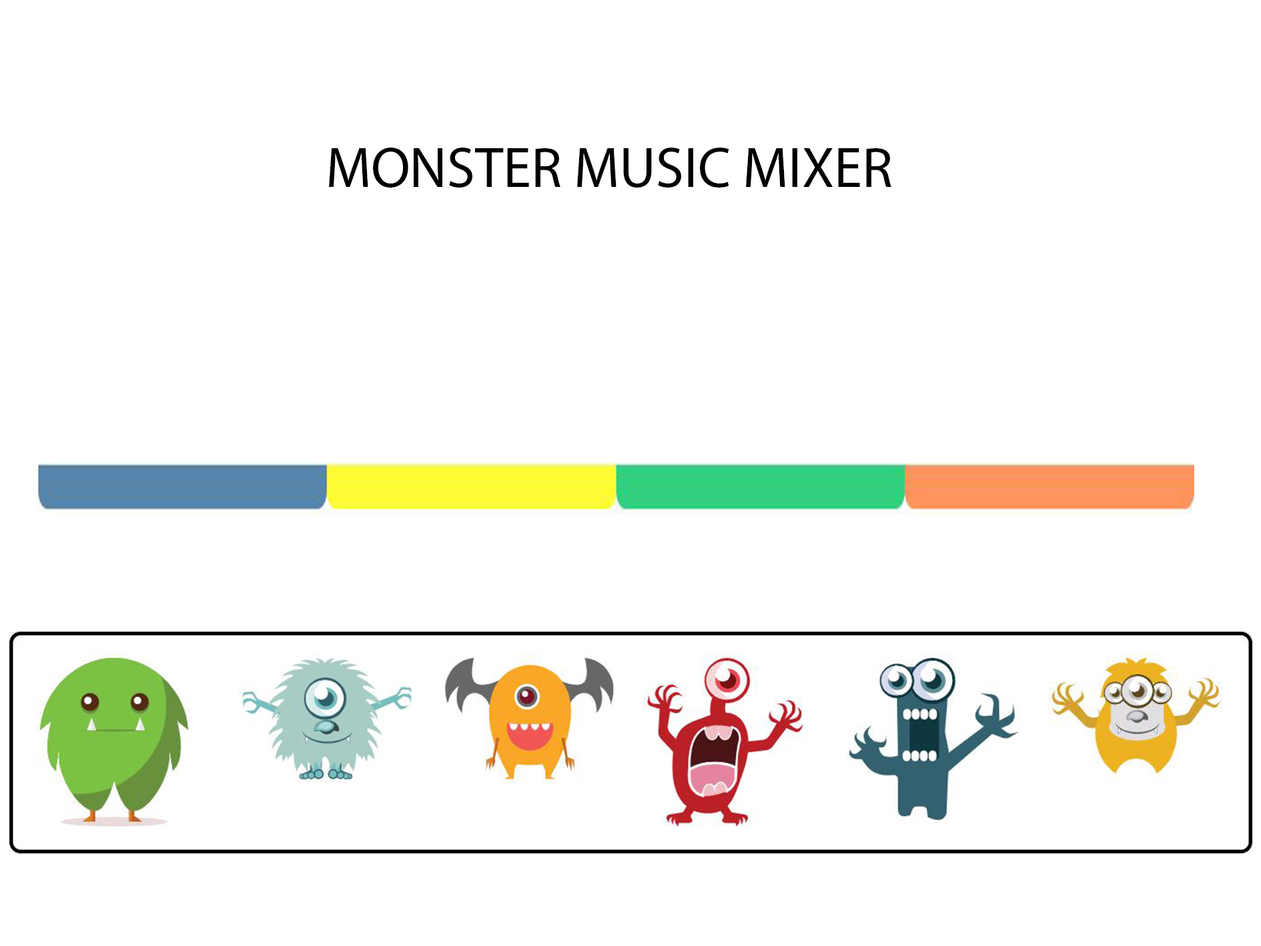
<style>
.page{position:relative;width:1261px;height:946px;background:#ffffff}
.page>*{position:absolute;margin:0}
.t1{font:57.9px "MyriadPro-Regular";color:#000000}
</style>
<div class="page">
<p class="t1" style="left:329px;top:147px;width:562px;height:41px">MONSTER MUSIC MIXER</p>
</div>
